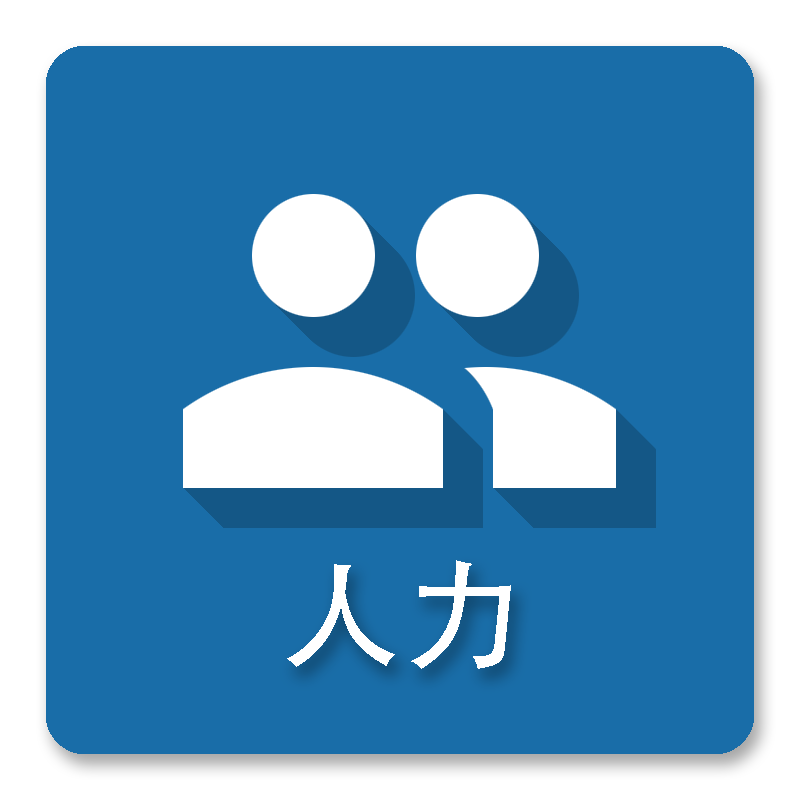
<style>
.page{position:relative;width:800px;height:800px;background:#196da8}
.page>*{position:absolute;margin:0}
.t1{font:120px "STHeitiSC-Medium";color:#ffffff}
</style>
<div class="page">
<p class="t1" style="left:287px;top:560px;width:224px;height:109px">人力</p>
</div>
